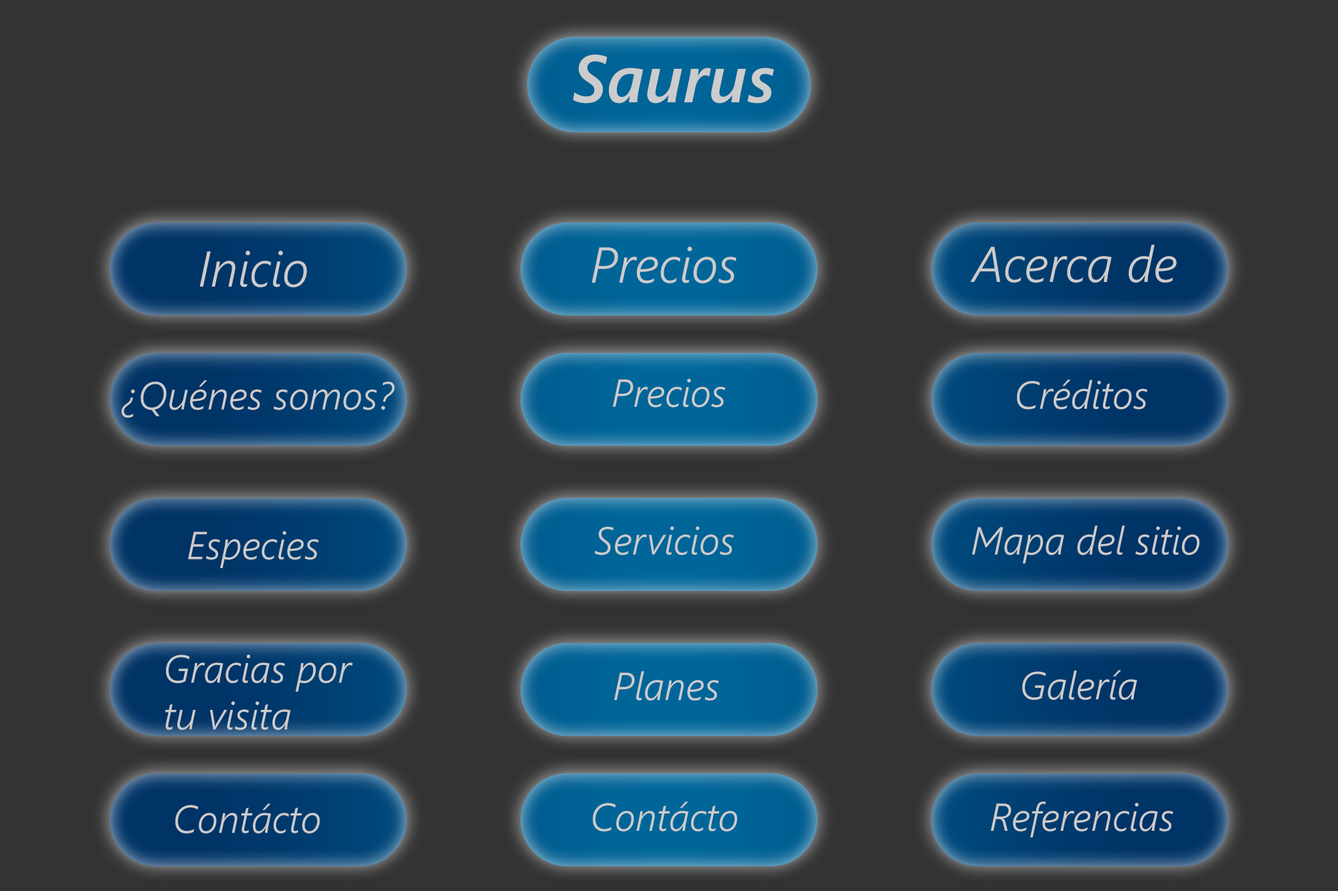
<style>
.page{position:relative;width:1338px;height:891px;background:#333333}
.page>*{position:absolute;margin:0}
.t1{font:66.9px "SegoeUI-SemiboldItalic";color:#cccccc}
.t2{font:50.2px "SegoeUI-SemilightItalic";color:#cccccc}
.t3{font:39px "SegoeUI-SemilightItalic";color:#cccccc}
</style>
<div class="page">
<p class="t1" style="left:572px;top:54px;width:202px;height:50px">Saurus</p>
<p class="t2" style="left:970px;top:245px;width:206px;height:38px">Acerca de</p>
<p class="t2" style="left:199px;top:251px;width:108px;height:37px">Inicio</p>
<p class="t2" style="left:591px;top:247px;width:145px;height:37px">Precios</p>
<p class="t3" style="left:121px;top:381px;width:274px;height:37px">¿Quénes somos?</p>
<p class="t3" style="left:613px;top:379px;width:112px;height:29px">Precios</p>
<p class="t3" style="left:1017px;top:380px;width:130px;height:30px">Créditos</p>
<p class="t3" style="left:188px;top:531px;width:131px;height:37px">Especies</p>
<p class="t3" style="left:595px;top:526px;width:139px;height:30px">Servicios</p>
<p class="t3" style="left:972px;top:526px;width:227px;height:38px">Mapa del sitio</p>
<p class="t3" style="left:165px;top:655px;width:187px;height:75px">Gracias por <br>tu visita</p>
<p class="t3" style="left:614px;top:671px;width:105px;height:30px">Planes</p>
<p class="t3" style="left:1022px;top:670px;width:115px;height:30px">Galería</p>
<p class="t3" style="left:175px;top:804px;width:145px;height:30px">Contácto</p>
<p class="t3" style="left:593px;top:802px;width:144px;height:30px">Contácto</p>
<p class="t3" style="left:990px;top:802px;width:183px;height:36px">Referencias</p>
</div>
